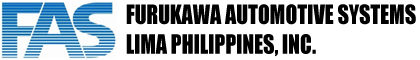
<style>
.page{position:relative;width:420px;height:60px;background:#ffffff}
.page>*{position:absolute;margin:0}
.t1{font:24.9px "Impact";color:#000000;scale:0.87 1}
</style>
<div class="page">
<p class="t1" style="left:126px;top:4px;width:290px;height:53px">FURUKAWA AUTOMOTIVE SYSTEMS<br>LIMA PHILIPPINES, INC.</p>
</div>
